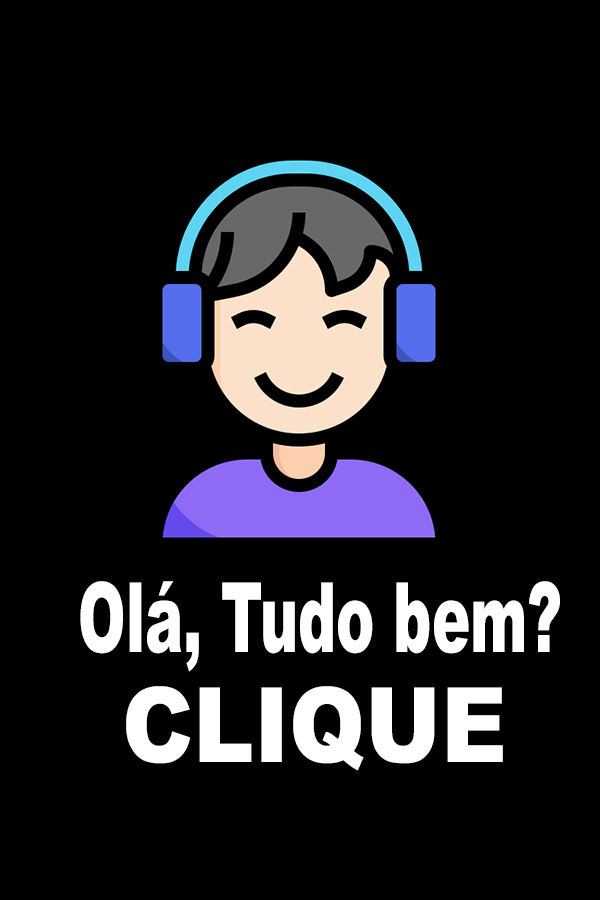
<style>
.page{position:relative;width:600px;height:900px;background:#000000}
.page>*{position:absolute;margin:0}
.t1{font:97px "Arial-Black";color:#ffffff;scale:0.59 1}
.t2{font:103.9px "Arial-Black";color:#ffffff;scale:0.88 1}
</style>
<div class="page">
<p class="t1" style="left:80px;top:581px;width:480px;height:91px">Olá, Tudo bem?</p>
<p class="t2" style="left:126px;top:686px;width:377px;height:85px">CLIQUE</p>
</div>
